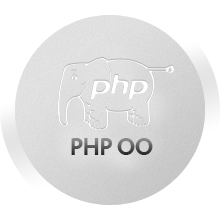
<style>
.page{position:relative;width:220px;height:220px;background:#ffffff}
.page>*{position:absolute;margin:0}
.t1{font:23.9px "Vegur-Bold";font-variant:small-caps}
</style>
<div class="page">
<p class="t1" style="left:71px;top:138px;width:82px;height:17px">PHP OO</p>
</div>
